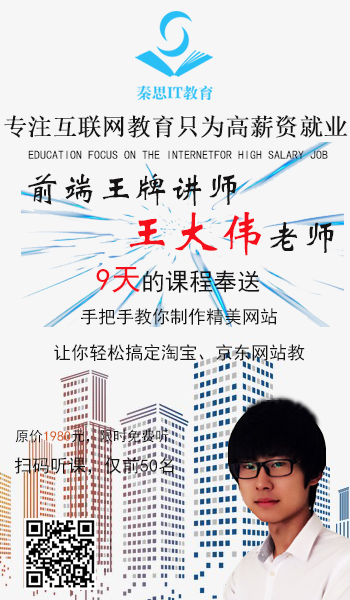
<style>
.page{position:relative;width:350px;height:600px;background:#f6f6f6}
.page>*{position:absolute;margin:0}
.t1{font:24px "SimSun";color:#161314;font-weight:bold}
.t2{font:12px "SimHei";color:#161314}
.t3{font:36px "STXinwei";color:#161314}
.t4{font:48px "STXinwei";color:#f50f1a}
.t5{font:24px "SimHei";color:#161314}
.t6{font:30px "SimHei";color:#f50f1a}
.t7{font:18px "SimHei";color:#161314}
.t8{font:14px "SimHei";color:#161314}
.t9{font:14px "SimHei";color:#d6591c}
</style>
<div class="page">
<p class="t1" style="left:4px;top:115px;width:344px;height:23px">专注互联网教育只为高薪资就业</p>
<p class="t2" style="left:28px;top:150px;width:300px;height:9px">EDUCATION FOCUS ON THE INTERNETFOR HIGH SALARY JOB</p>
<p class="t3" style="left:28px;top:173px;width:209px;height:33px">前端王牌讲师</p>
<p class="t4" style="left:129px;top:212px;width:205px;height:44px"><span class="t3"><br></span>王大伟<span class="t3">老师</span></p>
<p class="t5" style="left:96px;top:267px;width:164px;height:26px"><span class="t6">9天</span>的课程奉送</p>
<p class="t7" style="left:81px;top:308px;width:196px;height:17px">手把手教你制作精美网站</p>
<p class="t7" style="left:54px;top:344px;width:251px;height:17px">让你轻松搞定淘宝、京东网站教</p>
<p class="t8" style="left:15px;top:429px;width:154px;height:14px">原价<span class="t9">1980</span>元，限时免费听</p>
<p class="t7" style="left:14px;top:457px;width:160px;height:18px">扫码听课，仅前50名</p>
</div>
